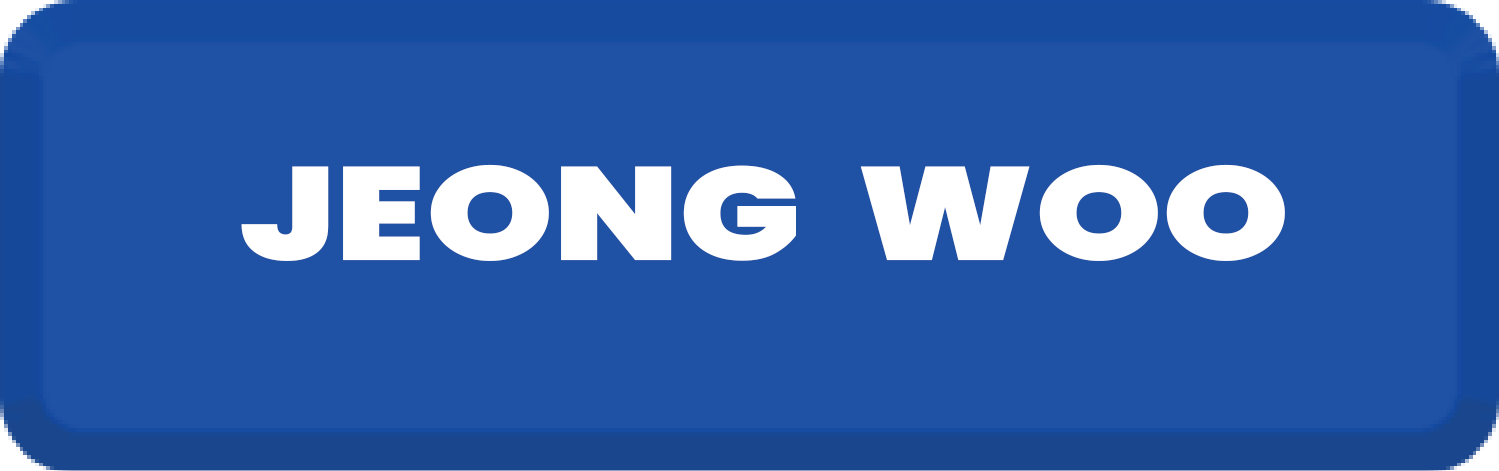
<style>
.page{position:relative;width:1499px;height:471px;background:#1f51a4}
.page>*{position:absolute;margin:0}
.t1{font:132px "Poppins-Black";color:#ffffff;scale:1.23 1}
</style>
<div class="page">
<p class="t1" style="left:241px;top:164px;width:1044px;height:97px">JEONG  WOO</p>
</div>
